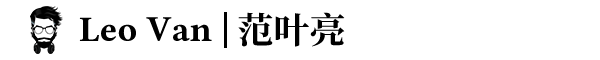
<style>
.page{position:relative;width:600px;height:60px;background:#ffffff}
.page>*{position:absolute;margin:0}
.t1{font:36px "LinLibertineB";color:#000000}
.t2{font:36px "SourceHanSerifCN-Bold";color:#000000}
</style>
<div class="page">
<p class="t1" style="left:79px;top:17px;width:133px;height:24px">Leo Van</p>
<p class="t2" style="left:238px;top:12px;width:107px;height:35px">范叶亮</p>
</div>
